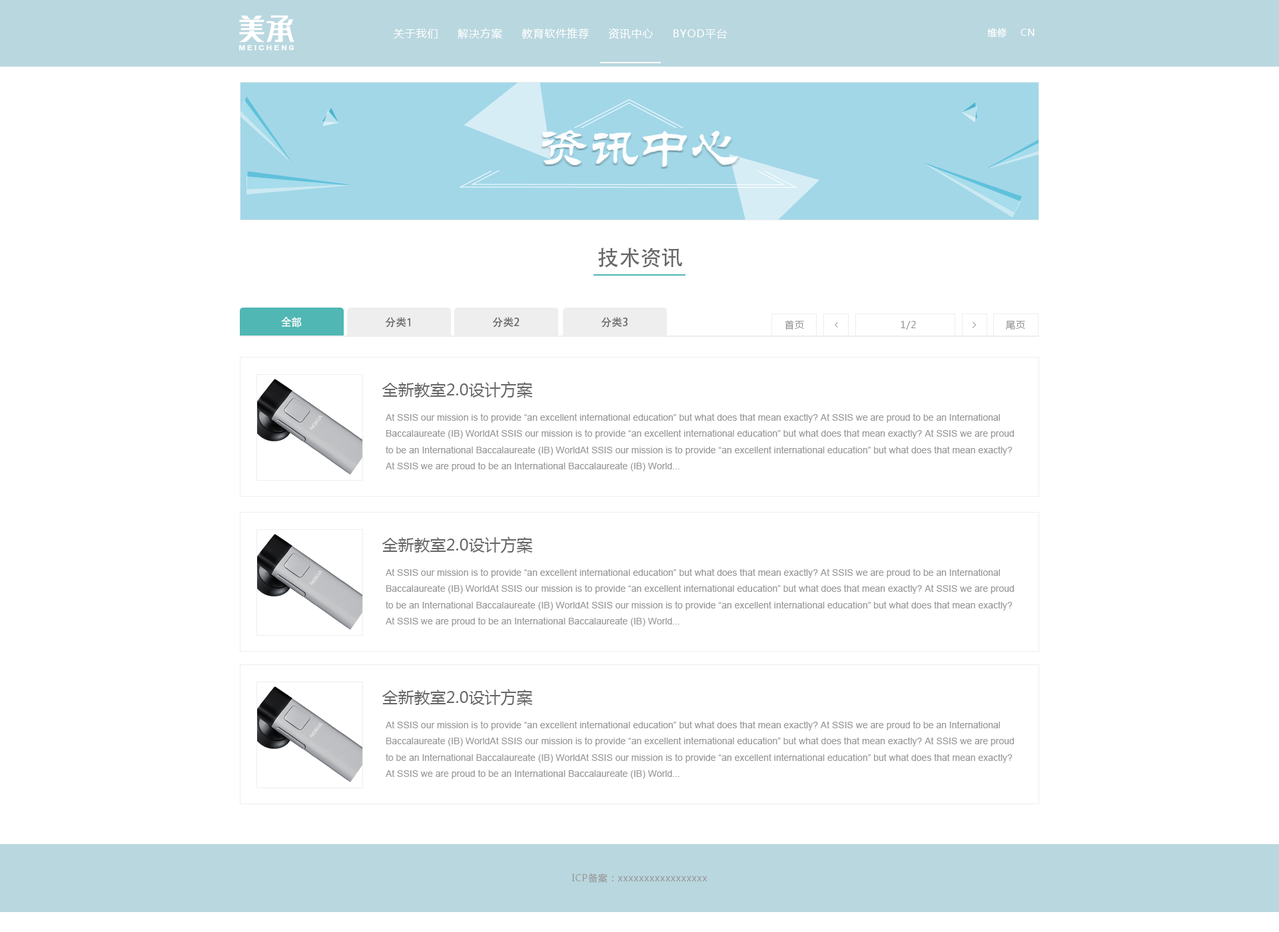
<style>
.page{position:relative;width:1279px;height:932px;background:#ffffff}
.page>*{position:absolute;margin:0}
.t1{font:10.7px "MicrosoftYaHei";letter-spacing:0.06em;color:#ffffff}
.t2{font:9.3px "MicrosoftYaHei";letter-spacing:0.06em;color:#ffffff}
.t3{font:50.6px "FZL2JW--GB1-0";color:#fefefe}
.t4{font:21.3px "AdobeHeitiStd-Regular";color:#666666}
.t5{font:10.7px "AdobeHeitiStd-Regular";color:#ffffff}
.t6{font:10.7px "AdobeHeitiStd-Regular";color:#666666}
.t7{font:9.3px "MicrosoftYaHei";letter-spacing:0.06em;color:#929292}
.t8{font:16px "MicrosoftYaHei";color:#666666}
.t9{font:9.3px "ArialMT";color:#999999}
.t10{font:9.3px "MicrosoftYaHei";letter-spacing:0.06em;color:#999999}
</style>
<div class="page">
<p class="t1" style="left:394px;top:28px;width:333px;height:11px">关于我们     解决方案     教育软件推荐     资讯中心     BYOD平台</p>
<p class="t2" style="left:987px;top:28px;width:47px;height:10px">维修    CN</p>
<p class="t3" style="left:542px;top:130px;width:197px;height:37px">资讯中心</p>
<p class="t4" style="left:598px;top:248px;width:85px;height:20px">技术资讯</p>
<p class="t5" style="left:281px;top:317px;width:21px;height:11px">全部</p>
<p class="t6" style="left:385px;top:317px;width:25px;height:11px">分类1</p>
<p class="t6" style="left:492px;top:317px;width:28px;height:11px">分类2</p>
<p class="t6" style="left:601px;top:317px;width:27px;height:11px">分类3</p>
<p class="t7" style="left:785px;top:320px;width:19px;height:10px">首页</p>
<p class="t7" style="left:900px;top:321px;width:16px;height:9px">1/2</p>
<p class="t7" style="left:1006px;top:320px;width:19px;height:10px">尾页</p>
<p class="t8" style="left:382px;top:382px;width:151px;height:16px">全新教室2.0设计方案</p>
<p class="t9" style="left:386px;top:414px;width:628px;height:58px">At SSIS our mission is to provide “an excellent international education” but what does that mean exactly? At SSIS we are proud to be an International Baccalaureate (IB) WorldAt SSIS our mission is to provide “an excellent international education” but what does that mean exactly? At SSIS we are proud to be an International Baccalaureate (IB) WorldAt SSIS our mission is to provide “an excellent international education” but what does that mean exactly? At SSIS we are proud to be an International Baccalaureate (IB) World...</p>
<p class="t8" style="left:382px;top:537px;width:151px;height:16px">全新教室2.0设计方案</p>
<p class="t9" style="left:386px;top:569px;width:628px;height:58px">At SSIS our mission is to provide “an excellent international education” but what does that mean exactly? At SSIS we are proud to be an International Baccalaureate (IB) WorldAt SSIS our mission is to provide “an excellent international education” but what does that mean exactly? At SSIS we are proud to be an International Baccalaureate (IB) WorldAt SSIS our mission is to provide “an excellent international education” but what does that mean exactly? At SSIS we are proud to be an International Baccalaureate (IB) World...</p>
<p class="t8" style="left:382px;top:689px;width:151px;height:17px">全新教室2.0设计方案</p>
<p class="t9" style="left:386px;top:721px;width:628px;height:58px">At SSIS our mission is to provide “an excellent international education” but what does that mean exactly? At SSIS we are proud to be an International Baccalaureate (IB) WorldAt SSIS our mission is to provide “an excellent international education” but what does that mean exactly? At SSIS we are proud to be an International Baccalaureate (IB) WorldAt SSIS our mission is to provide “an excellent international education” but what does that mean exactly? At SSIS we are proud to be an International Baccalaureate (IB) World...</p>
<p class="t10" style="left:571px;top:874px;width:136px;height:10px">ICP备案：xxxxxxxxxxxxxxxxx</p>
</div>
